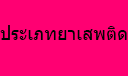
<style>
.page{position:relative;width:128px;height:76px;background:#ff0072}
.page>*{position:absolute;margin:0}
.t1{font:18px "Tahoma";color:#000203}
</style>
<div class="page">
<p class="t1" style="left:0px;top:25px;width:127px;height:15px">ประเภทยาเสพติด</p>
</div>
